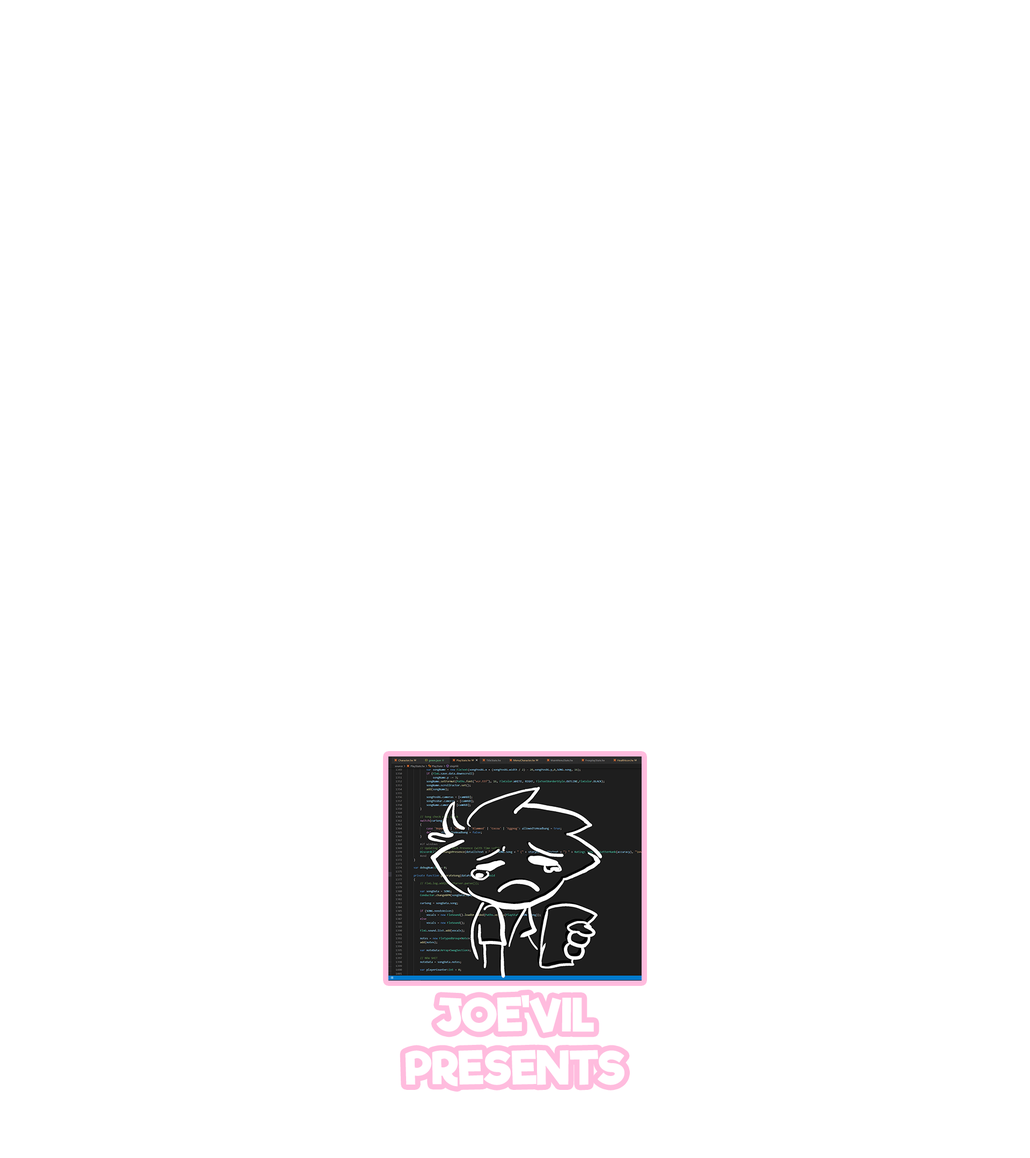
<style>
.page{position:relative;width:1030px;height:1158px;background:#ffffff}
.page>*{position:absolute;margin:0}
.t1{font:44.5px "RifficFree-Bold";color:#ffffff;text-transform:uppercase}
</style>
<div class="page">
<p class="t1" style="left:405px;top:995px;width:219px;height:92px;text-align:center">joe'vil<br>presents</p>
</div>
